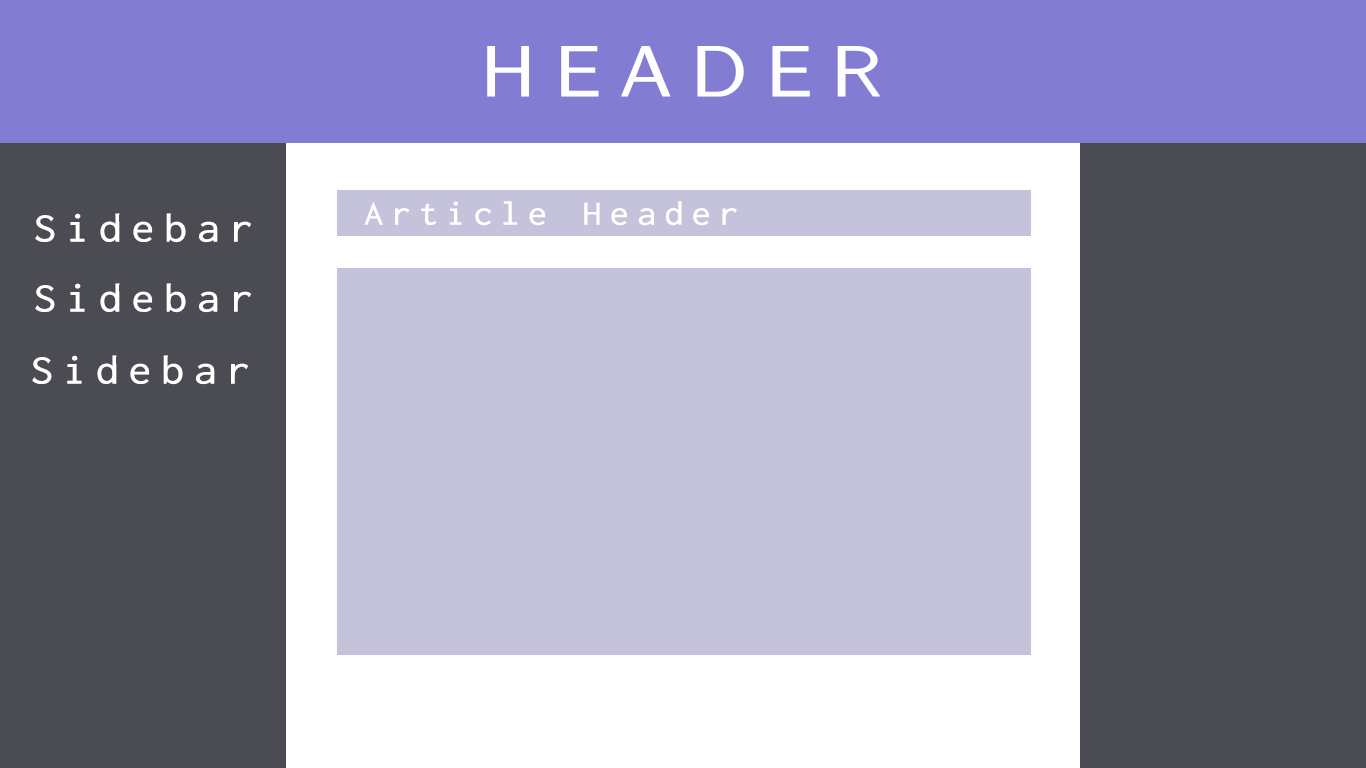
<style>
.page{position:relative;width:1366px;height:768px;background:#4b4b54}
.page>*{position:absolute;margin:0}
.t1{font:72px "CMUSansSerif";letter-spacing:0.2em;color:#ffffff;font-weight:bold;scale:1.1 1}
.t2{font:30px "Inconsolata-dz";letter-spacing:0.2em;color:#ffffff;font-weight:bold;scale:1.1 1}
.t3{font:36px "Inconsolata-dz";letter-spacing:0.2em;color:#ffffff;font-weight:bold;scale:1.1 1}
</style>
<div class="page">
<p class="t1" style="left:487px;top:46px;width:393px;height:51px">HEADER</p>
<p class="t2" style="left:364px;top:201px;width:373px;height:25px">Article Header</p>
<p class="t3" style="left:35px;top:213px;width:216px;height:30px">Sidebar</p>
<p class="t3" style="left:35px;top:283px;width:216px;height:30px">Sidebar</p>
<p class="t3" style="left:32px;top:355px;width:216px;height:30px">Sidebar</p>
</div>
